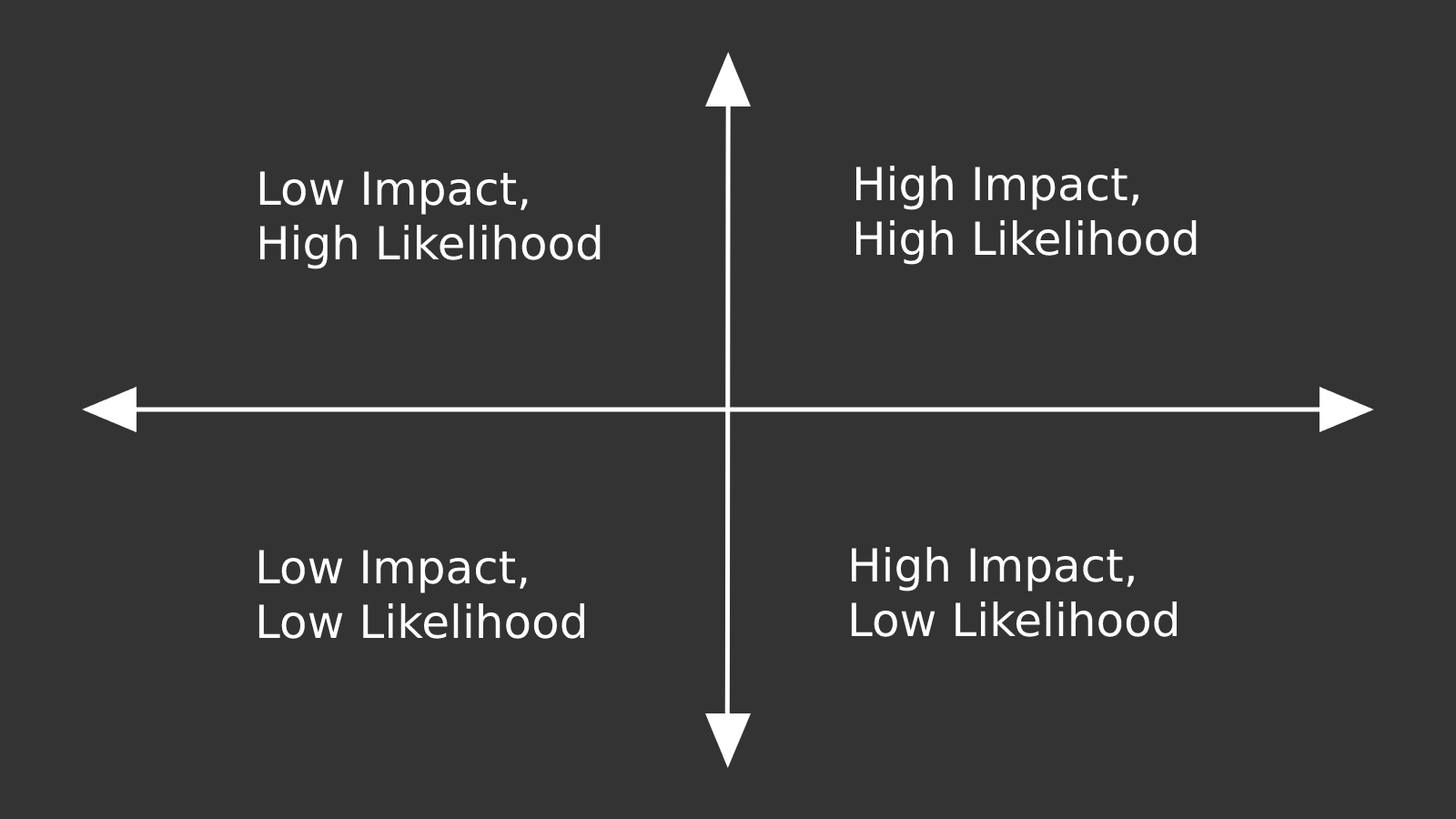
<style>
.page{position:relative;width:1456px;height:819px;background:#333333}
.page>*{position:absolute;margin:0}
.t1{font:45.5px "DejaVuSans";color:#ffffff}
</style>
<div class="page">
<p class="t1" style="left:259px;top:171px;width:342px;height:98px">Low Impact,<br>High Likelihood</p>
<p class="t1" style="left:855px;top:166px;width:342px;height:99px">High Impact,<br>High Likelihood</p>
<p class="t1" style="left:258px;top:550px;width:326px;height:89px">Low Impact,<br>Low Likelihood</p>
<p class="t1" style="left:851px;top:547px;width:326px;height:90px">High Impact,<br>Low Likelihood</p>
</div>
